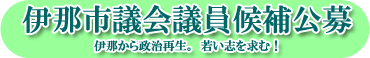
<style>
.page{position:relative;width:370px;height:58px;background:#99ff99}
.page>*{position:absolute;margin:0}
.t1{font:30px "HGPMinchoE";color:#006666}
.t2{font:12px "HGPMinchoE";color:#006666}
</style>
<div class="page">
<p class="t1" style="left:22px;top:5px;width:330px;height:29px">伊那市議会議員候補公募</p>
<p class="t2" style="left:94px;top:40px;width:184px;height:12px">伊那から政治再生。若い志を求む！</p>
</div>
